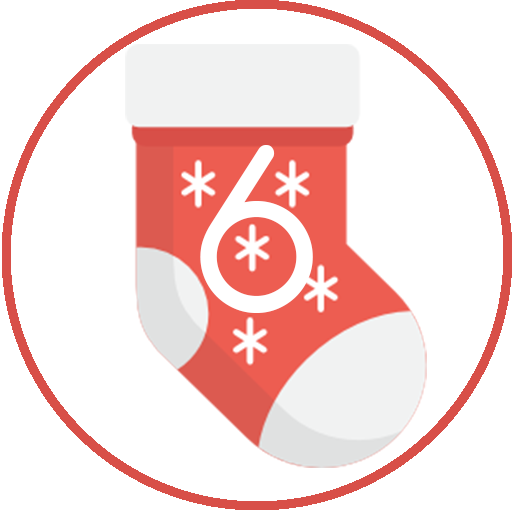
<style>
.page{position:relative;width:512px;height:512px;background:#ffffff}
.page>*{position:absolute;margin:0}
.t1{font:263.1px "Antipasto";color:#ffffff}
</style>
<div class="page">
<p class="t1" style="left:200px;top:145px;width:113px;height:168px">6</p>
</div>
